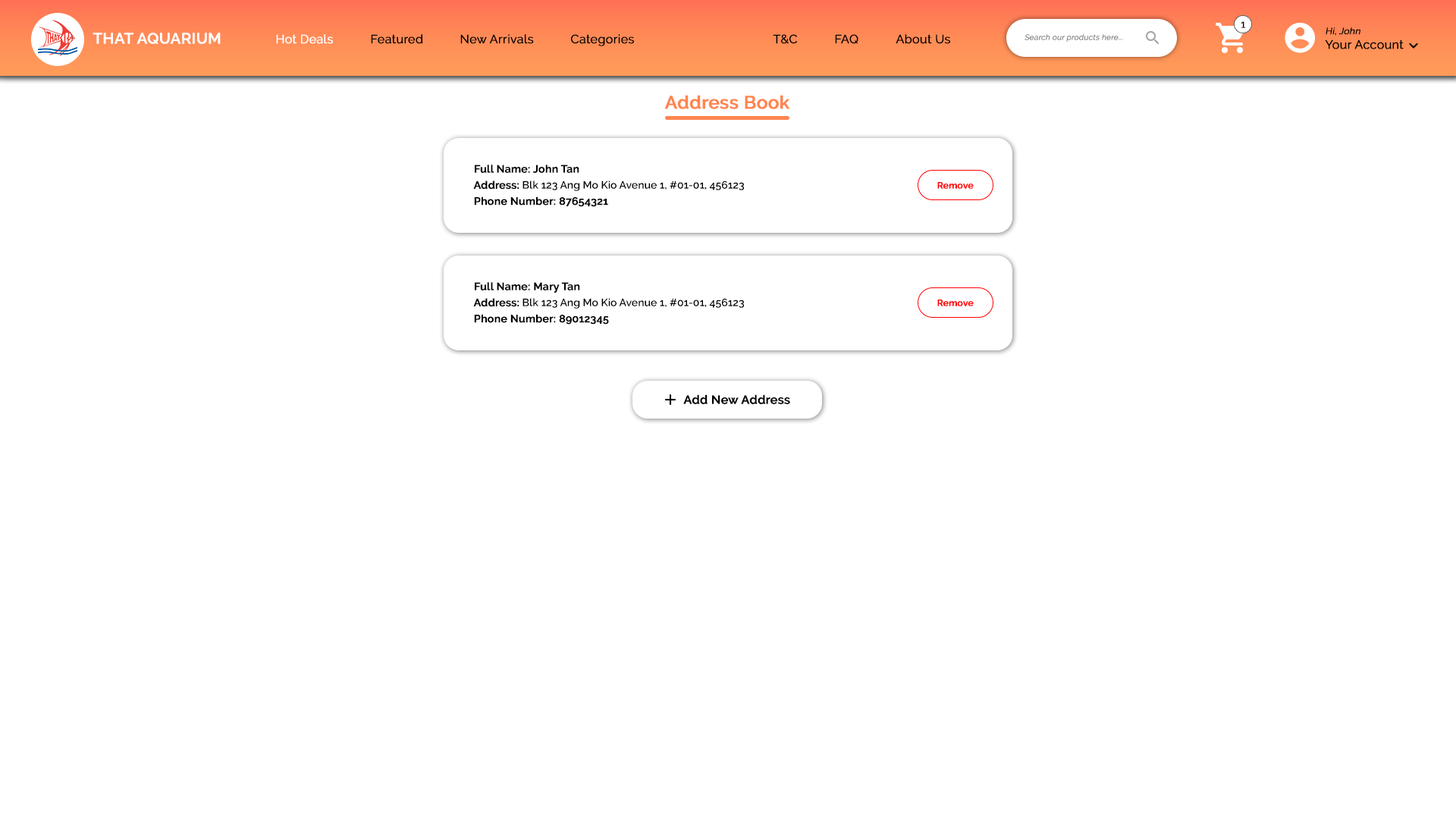
<style>
.page{position:relative;width:1456px;height:819px;background:#ffffff}
.page>*{position:absolute;margin:0}
.t1{font:10.6px "Raleway-Regular";color:#000000;font-weight:bold}
.t2{font:12.1px "Raleway-Regular";color:#000000;font-weight:bold}
.t3{font:9.1px "Raleway-Regular";color:#000000;font-weight:bold;font-style:italic}
.t4{font:15.2px "Raleway-SemiBold";color:#ffffff;font-weight:bold}
.t5{font:12.1px "Raleway-Regular";color:#ffffff;font-weight:bold}
.t6{font:7.6px "Raleway-Regular";color:#787878;font-weight:bold;font-style:italic}
.t7{font:18.2px "Raleway-SemiBold";color:#ff854f;font-weight:bold}
.t8{font:10.6px "Raleway-SemiBold";color:#000000;font-weight:bold}
.t9{font:10.6px "Raleway-SemiBold";color:#000000}
.t10{font:9.1px "Raleway-SemiBold";color:#ff0000;font-weight:bold}
.t11{font:12.1px "Raleway-SemiBold";color:#000000;font-weight:bold}
</style>
<div class="page">
<p class="t1" style="left:1241px;top:21px;width:5px;height:7px">1</p>
<p class="t2" style="left:1325px;top:27px;width:79px;height:22px"><span class="t3">Hi, John<br></span>Your Account</p>
<p class="t4" style="left:93px;top:33px;width:128px;height:11px">THAT AQUARIUM</p>
<p class="t5" style="left:276px;top:34px;width:57px;height:10px">Hot Deals</p>
<p class="t2" style="left:371px;top:34px;width:52px;height:10px">Featured</p>
<p class="t2" style="left:460px;top:34px;width:74px;height:10px">New Arrivals</p>
<p class="t2" style="left:571px;top:34px;width:63px;height:12px">Categories</p>
<p class="t2" style="left:773px;top:34px;width:25px;height:10px">T&amp;C</p>
<p class="t2" style="left:835px;top:34px;width:23px;height:10px">FAQ</p>
<p class="t2" style="left:896px;top:34px;width:54px;height:10px">About Us</p>
<p class="t6" style="left:1024px;top:34px;width:99px;height:8px">Search our products here...</p>
<p class="t7" style="left:664px;top:95px;width:126px;height:14px">Address Book</p>
<p class="t8" style="left:475px;top:165px;width:104px;height:8px">Full Name: John Tan</p>
<p class="t9" style="left:473px;top:180px;width:271px;height:11px"><span class="t8">Address: </span>Blk 123 Ang Mo Kio Avenue 1, #01-01, 456123</p>
<p class="t10" style="left:937px;top:182px;width:37px;height:7px">Remove</p>
<p class="t8" style="left:474px;top:196px;width:134px;height:11px">Phone Number: 87654321</p>
<p class="t8" style="left:475px;top:282px;width:105px;height:11px">Full Name: Mary Tan</p>
<p class="t9" style="left:473px;top:298px;width:271px;height:11px"><span class="t8">Address: </span>Blk 123 Ang Mo Kio Avenue 1, #01-01, 456123</p>
<p class="t10" style="left:937px;top:300px;width:37px;height:6px">Remove</p>
<p class="t8" style="left:474px;top:314px;width:135px;height:11px">Phone Number: 89012345</p>
<p class="t11" style="left:683px;top:394px;width:107px;height:10px">Add New Address</p>
</div>
